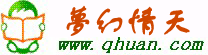
<style>
.page{position:relative;width:208px;height:55px;background:#fffcff}
.page>*{position:absolute;margin:0}
.t1{font:32px "FZSTK--GBK1-0";color:#cf4600;font-weight:bold}
</style>
<div class="page">
<p class="t1" style="left:66px;top:5px;width:124px;height:31px">夢幻情天</p>
</div>
